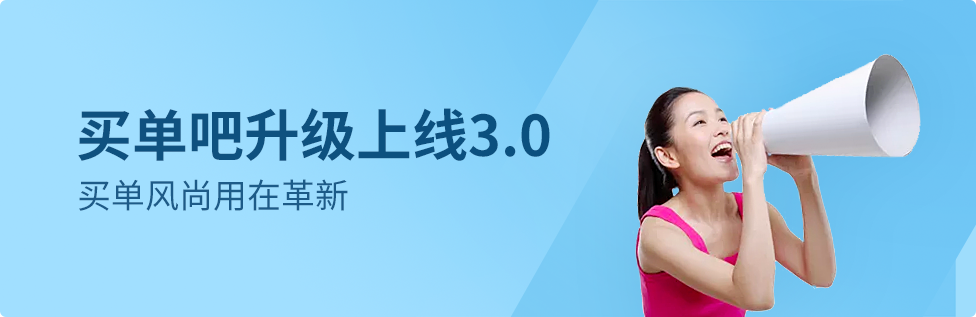
<style>
.page{position:relative;width:976px;height:317px}
.page>*{position:absolute;margin:0}
.t1{font:56px "SourceHanSansCN-Bold";color:#004676}
.t2{font:34px "SourceHanSansCN-Regular";color:#1d5b88}
</style>
<div class="page">
<p class="t1" style="left:78px;top:108px;width:472px;height:53px;opacity:0.95">买单吧升级上线3.0</p>
<p class="t2" style="left:79px;top:179px;width:269px;height:32px">买单风尚用在革新</p>
</div>
